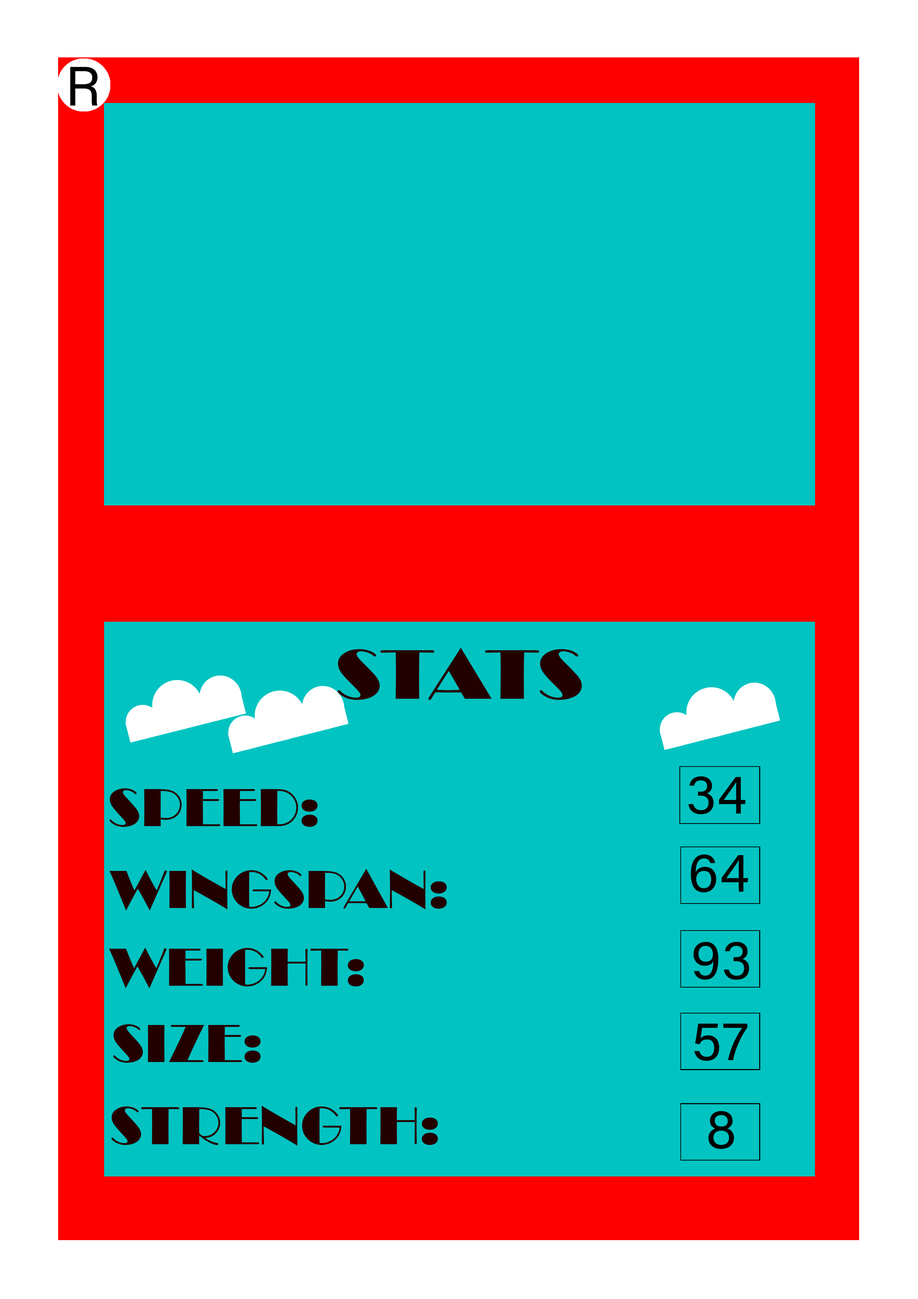
<style>
.page{position:relative;width:918px;height:1299px;background:#01c3c1}
.page>*{position:absolute;margin:0}
.t1{font:55.5px "AcuminConcept-Regular";color:#000000}
.t2{font:72.4px "Broadway";color:#230000;scale:1.09 1}
.t3{font:55.5px "Broadway";color:#230000}
</style>
<div class="page">
<p class="t1" style="left:70px;top:67px;width:28px;height:39px">R</p>
<p class="t2" style="left:338px;top:648px;width:244px;height:52px">STATS</p>
<p class="t1" style="left:688px;top:776px;width:58px;height:38px">34</p>
<p class="t3" style="left:110px;top:788px;width:208px;height:39px">SPEED:</p>
<p class="t1" style="left:691px;top:854px;width:58px;height:38px">64</p>
<p class="t3" style="left:109px;top:869px;width:338px;height:41px">WINGSPAN:</p>
<p class="t1" style="left:693px;top:941px;width:56px;height:39px">93</p>
<p class="t3" style="left:109px;top:947px;width:255px;height:41px">WEIGHT:</p>
<p class="t3" style="left:113px;top:1024px;width:148px;height:39px">SIZE:</p>
<p class="t1" style="left:694px;top:1023px;width:53px;height:38px">57</p>
<p class="t3" style="left:111px;top:1105px;width:327px;height:40px">STRENGTH:</p>
<p class="t1" style="left:708px;top:1111px;width:26px;height:38px">8</p>
</div>
